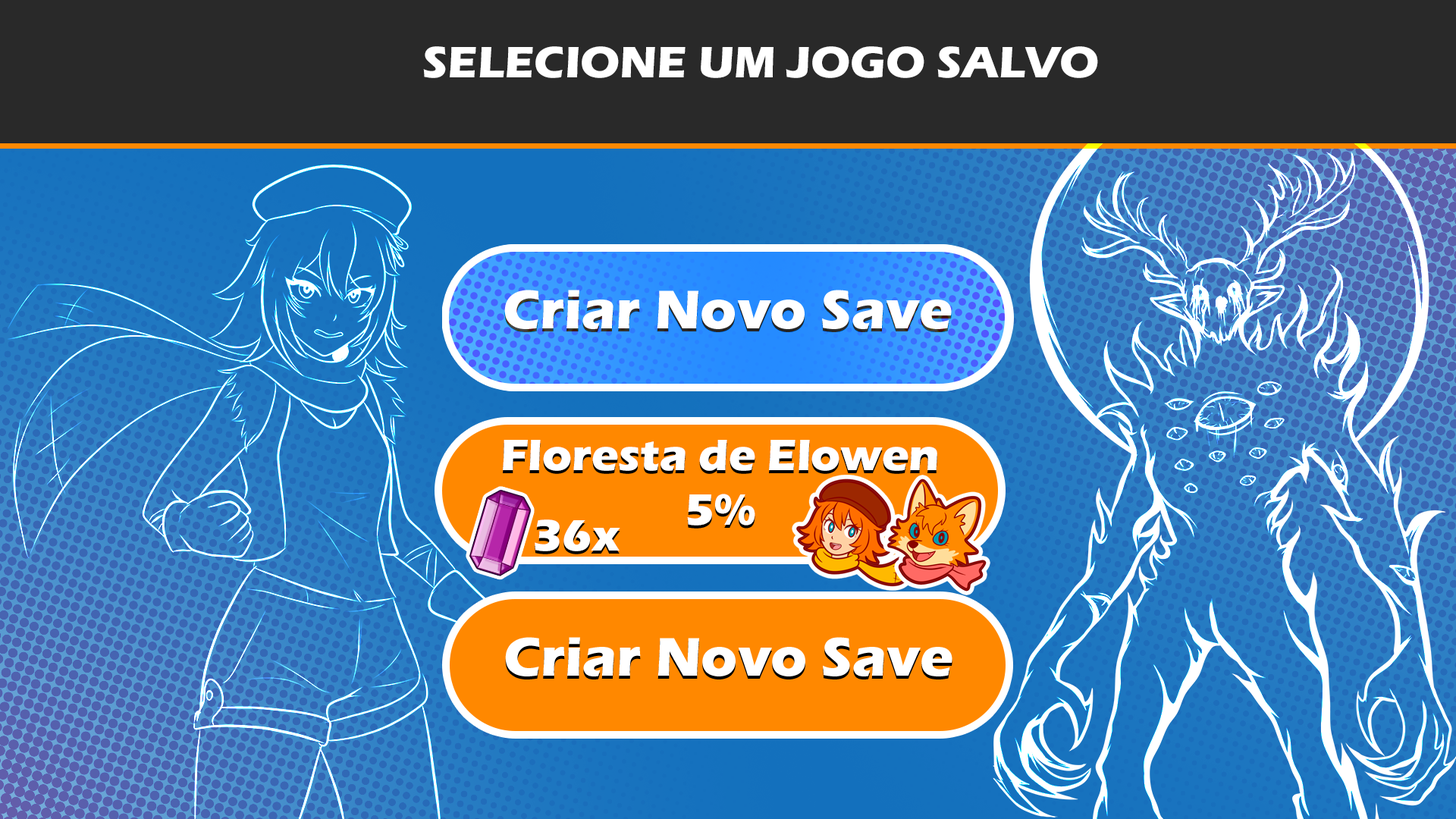
<style>
.page{position:relative;width:1456px;height:819px}
.page>*{position:absolute;margin:0}
.t1{font:45.5px "ErasITC-Bold";color:#ffffff}
</style>
<div class="page">
<p class="t1" style="left:423px;top:46px;width:675px;height:32px">SELECIONE UM JOGO SALVO</p>
<p class="t1" style="left:503px;top:440px;width:434px;height:86px;text-align:center">Floresta de Elowen<br>5%</p>
<p class="t1" style="left:535px;top:519px;width:85px;height:32px">36x</p>
</div>
